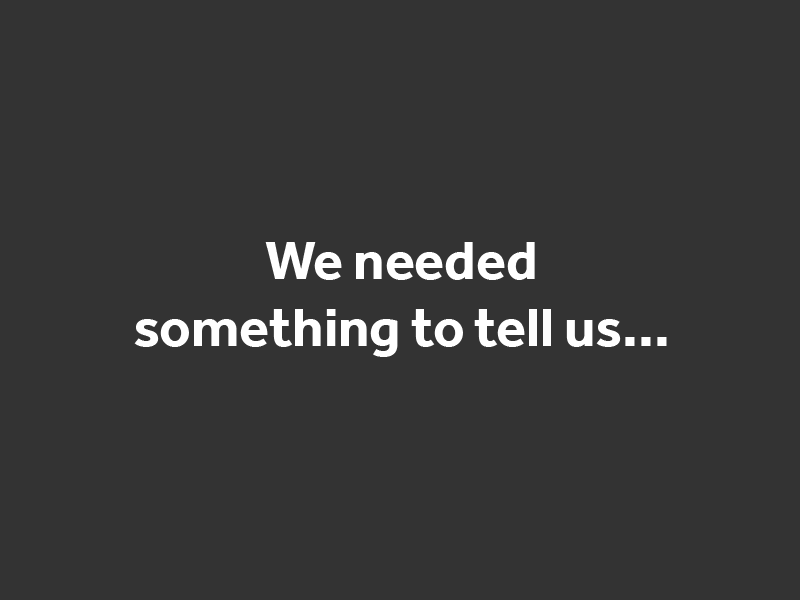
<style>
.page{position:relative;width:800px;height:600px;background:#333333}
.page>*{position:absolute;margin:0}
.t1{font:55.7px "Effra-Bold";color:#ffffff}
</style>
<div class="page">
<p class="t1" style="left:134px;top:242px;width:533px;height:115px;text-align:center">We needed<br>something to tell us...</p>
</div>
